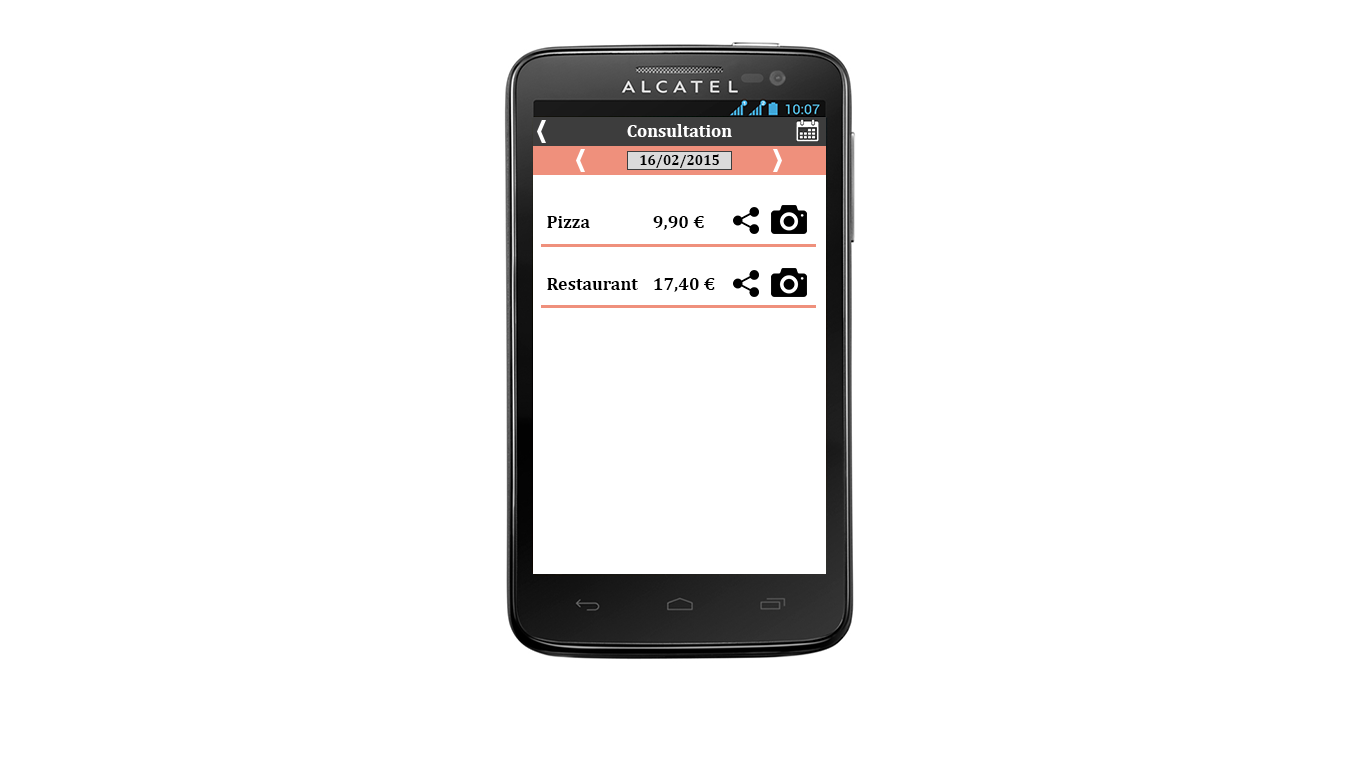
<style>
.page{position:relative;width:1366px;height:768px;background:#ffffff}
.page>*{position:absolute;margin:0}
.t1{font:18px "Cambria-Bold";color:#ffffff}
.t2{font:14px "Cambria-Bold";color:#000000}
.t3{font:18px "Cambria-Bold";color:#000000}
</style>
<div class="page">
<p class="t1" style="left:627px;top:124px;width:105px;height:13px">Consultation</p>
<p class="t2" style="left:640px;top:154px;width:79px;height:14px">16/02/2015</p>
<p class="t3" style="left:547px;top:216px;width:43px;height:12px">Pizza</p>
<p class="t3" style="left:653px;top:216px;width:51px;height:14px">9,90 €</p>
<p class="t3" style="left:547px;top:278px;width:91px;height:12px">Restaurant</p>
<p class="t3" style="left:654px;top:278px;width:61px;height:14px">17,40 €</p>
</div>
